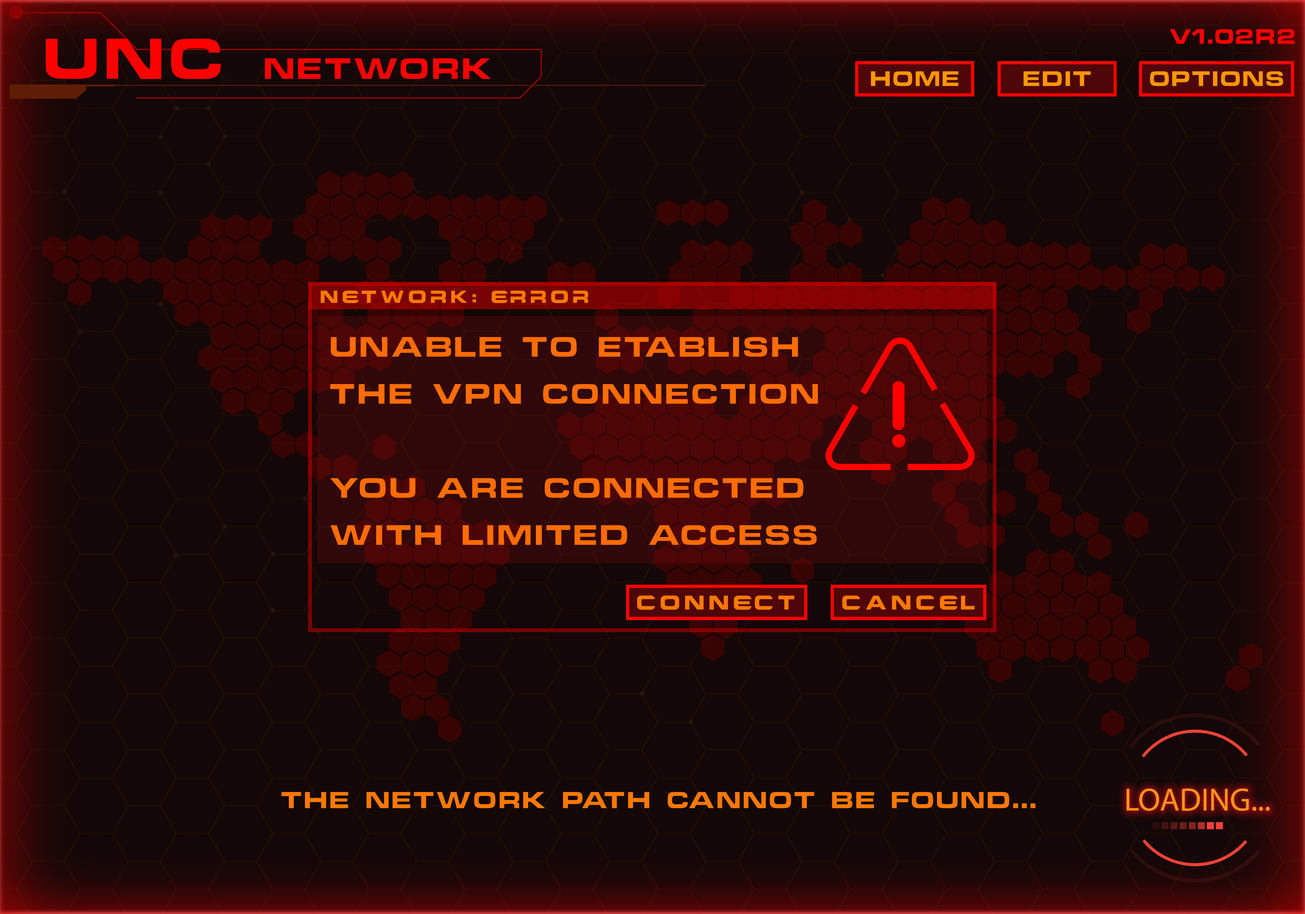
<style>
.page{position:relative;width:1305px;height:914px;background:#130707}
.page>*{position:absolute;margin:0}
.t1{font:19.1px "ChinoCapsSSK";letter-spacing:0.12em;color:#ff0000}
.t2{font:26.9px "ChinoCapsSSK";letter-spacing:0.12em;color:#ff0000}
.t3{font:52.4px "ChinoCapsSSK";letter-spacing:0.12em;color:#ff0000}
.t4{font:19.2px "ChinoCapsSSK";letter-spacing:0.12em;color:#ff9600}
.t5{font:16.8px "Criovision-Font";letter-spacing:0.12em;color:#ff7800}
.t6{font:25.7px/47px "ChinoCapsSSK";letter-spacing:0.12em;color:#ff6c00}
.t7{font:19.2px "Criovision-Font";letter-spacing:0.12em;color:#ff7800}
.t8{font:21.1px "ChinoCapsSSK";letter-spacing:0.12em;color:#ff7800}
</style>
<div class="page">
<p class="t1" style="left:1169px;top:29px;width:125px;height:15px">V1.02R2</p>
<p class="t2" style="left:46px;top:39px;width:445px;height:40px"><span class="t3">UNC </span>NETWORK</p>
<p class="t4" style="left:870px;top:71px;width:88px;height:15px">HOME</p>
<p class="t4" style="left:1023px;top:71px;width:68px;height:15px">EDIT</p>
<p class="t4" style="left:1149px;top:71px;width:134px;height:15px">OPTIONS</p>
<p class="t5" style="left:320px;top:290px;width:268px;height:13px">NETWORK: ERROR</p>
<p class="t6" style="left:330px;top:337px;width:488px;height:208px">UNABLE TO ETABLISH<br>THE VPN CONNECTION<br><br>YOU ARE CONNECTED<br>WITH LIMITED ACCESS</p>
<p class="t7" style="left:637px;top:596px;width:157px;height:14px">CONNECT</p>
<p class="t7" style="left:842px;top:596px;width:132px;height:14px">CANCEL</p>
<p class="t8" style="left:281px;top:792px;width:754px;height:16px">The Network Path Cannot Be Found...</p>
</div>
